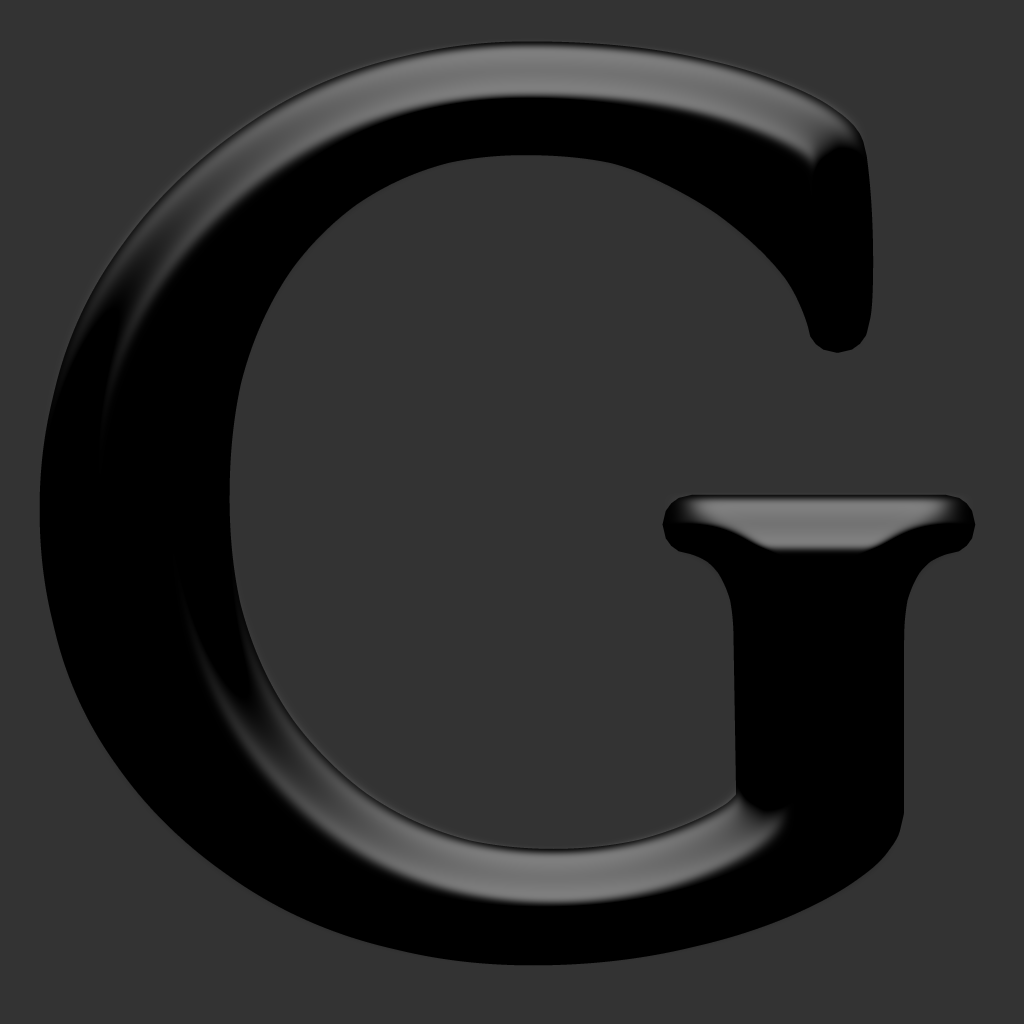
<style>
.page{position:relative;width:1024px;height:1024px;background:#333333}
.page>*{position:absolute;margin:0}
.t1{font:1292px "Assassin$";color:#000000}
</style>
<div class="page">
<p class="t1" style="left:68px;top:70px;width:879px;height:867px">G</p>
</div>
